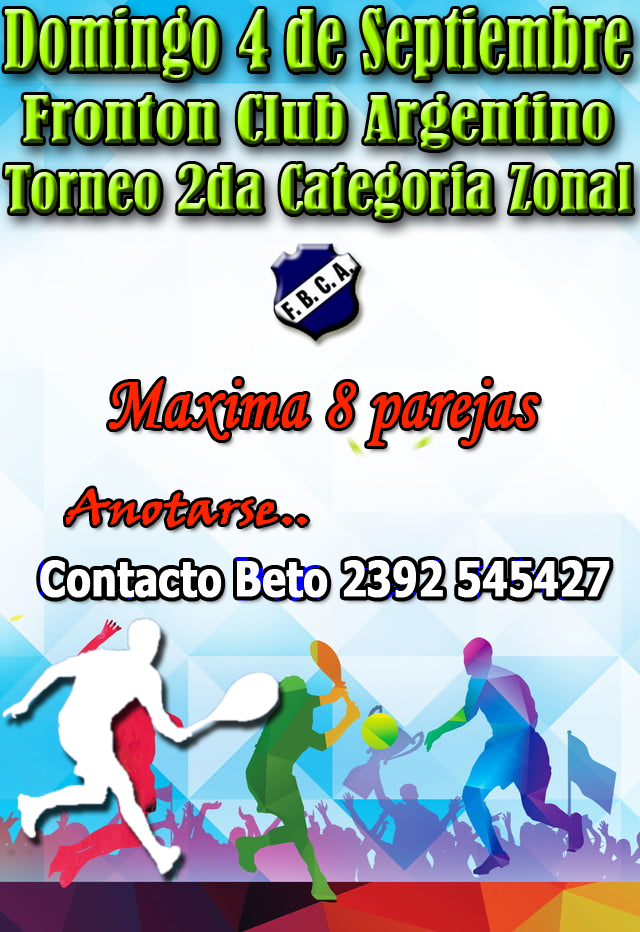
<style>
.page{position:relative;width:640px;height:932px}
.page>*{position:absolute;margin:0}
.t1{font:77.4px "BernardMT-Condensed";font-weight:bold;scale:0.78 1}
.t2{font:59.6px "BernardMT-Condensed";font-weight:bold;scale:1.07 1}
.t3{font:59.6px "BernardMT-Condensed";font-weight:bold;scale:0.95 1}
.t4{font:75.9px "MonotypeCorsiva";color:#ff2400;font-weight:bold;scale:0.85 1}
.t5{font:48.2px "Tahoma-Bold";color:#ffffff;font-weight:bold;scale:0.81 1}
</style>
<div class="page">
<p class="t1" style="left:4px;top:8px;width:627px;height:72px">Domingo 4 de Septiembre</p>
<p class="t2" style="left:23px;top:94px;width:589px;height:56px">Fronton Club Argentino</p>
<p class="t3" style="left:5px;top:164px;width:628px;height:56px">Torneo 2da Categoria Zonal</p>
<p class="t4" style="left:109px;top:379px;width:430px;height:67px">Maxima 8 parejas</p>
<p class="t5" style="left:40px;top:560px;width:570px;height:38px">Contacto Beto 2392 545427</p>
</div>
